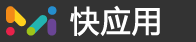
<style>
.page{position:relative;width:196px;height:42px;background:#333333}
.page>*{position:absolute;margin:0}
.t1{font:30px "MicrosoftYaHei";color:#ffffff;font-weight:bold}
</style>
<div class="page">
<p class="t1" style="left:70px;top:5px;width:90px;height:31px">快应用</p>
</div>
